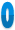
<style>
.page{position:relative;width:15px;height:30px;background:#0474b5}
.page>*{position:absolute;margin:0}
.t1{font:30px "HYb4gj"}
</style>
<div class="page">
<p class="t1" style="left:1px;top:1px;width:13px;height:27px">0</p>
</div>
